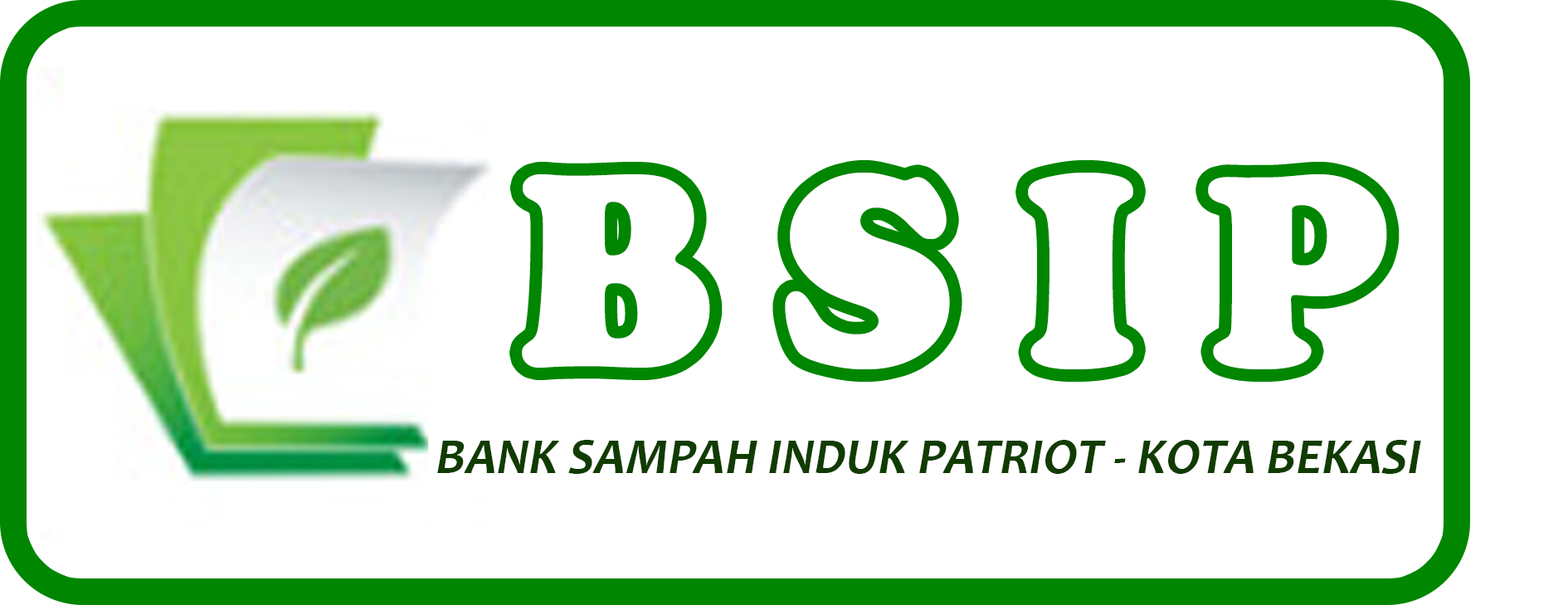
<style>
.page{position:relative;width:1568px;height:605px;background:#ffffff}
.page>*{position:absolute;margin:0}
.t1{font:285.1px "CooperBlack";color:#ffffff;scale:0.95 1}
.t2{font:51.6px "Candara-Bold";color:#113c01;font-style:italic;scale:0.95 1}
</style>
<div class="page">
<p class="t1" style="left:522px;top:173px;width:865px;height:196px">B S I P</p>
<p class="t2" style="left:437px;top:440px;width:984px;height:34px">BANK SAMPAH INDUK PATRIOT - KOTA BEKASI</p>
</div>
